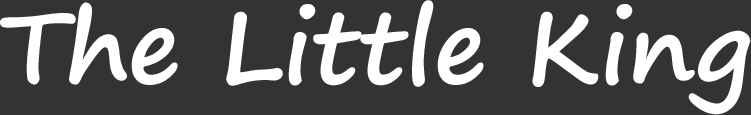
<style>
.page{position:relative;width:751px;height:115px;background:#333333}
.page>*{position:absolute;margin:0}
.t1{font:100px "SegoePrint-Bold";color:#ffffff}
</style>
<div class="page">
<p class="t1" style="left:0px;top:0px;width:751px;height:115px">The Little King</p>
</div>
